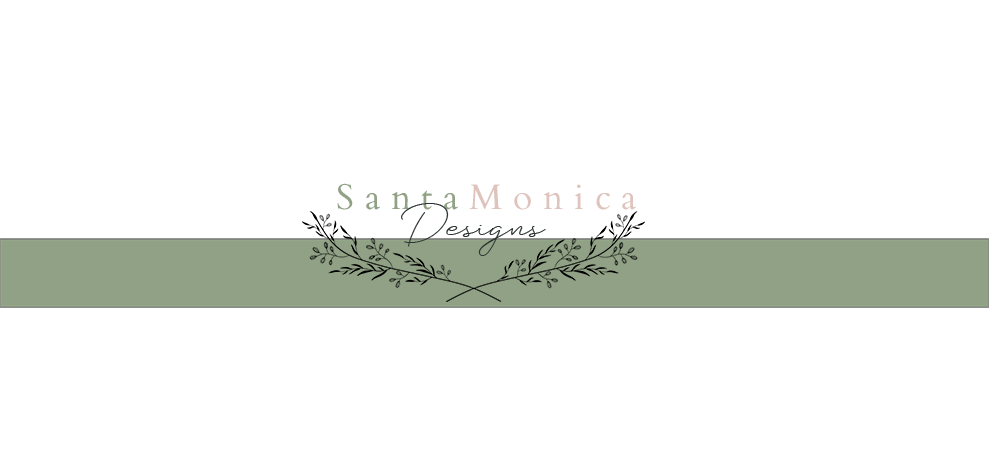
<style>
.page{position:relative;width:991px;height:452px;background:#ffffff}
.page>*{position:absolute;margin:0}
.t1{font:35.5px "Cardo-Regular";letter-spacing:0.3em;color:#dec4bd}
.t2{font:35.5px "Cardo-Regular";letter-spacing:0.3em;color:#90a185}
.t3{font:50.3px "Silhouette";color:#2f3535}
</style>
<div class="page">
<p class="t1" style="left:337px;top:183px;width:299px;height:27px"><span class="t2">Santa</span>Monica</p>
<p class="t3" style="left:401px;top:203px;width:145px;height:53px">Designs</p>
</div>
